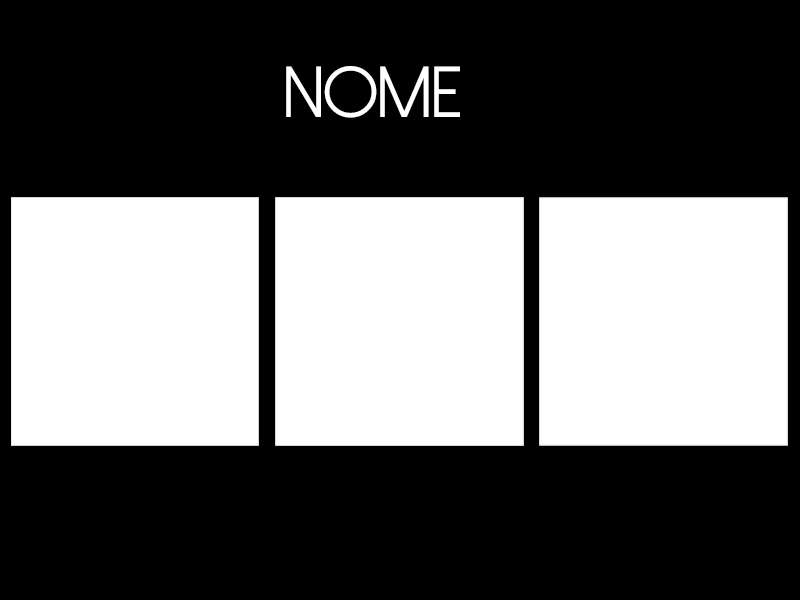
<style>
.page{position:relative;width:800px;height:600px;background:#000000}
.page>*{position:absolute;margin:0}
.t1{font:72px "DolceVita";color:#ffffff}
</style>
<div class="page">
<p class="t1" style="left:286px;top:66px;width:174px;height:52px">nome</p>
</div>
